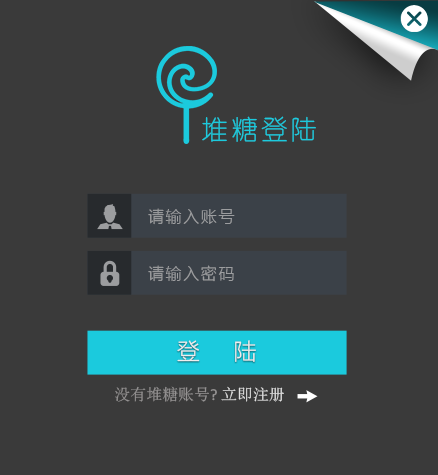
<style>
.page{position:relative;width:438px;height:475px;background:#3a3a3a}
.page>*{position:absolute;margin:0}
.t1{font:26.8px "YouYuan";letter-spacing:0.1em;color:#1ccadd}
.t2{font:16px "MicrosoftYaHeiLight";letter-spacing:0.1em;color:#9c9d9f}
.t3{font:22.8px "MicrosoftYaHeiLight";color:#eeeeee}
.t4{font:16px "SimSun";color:#959393}
.t5{font:16px "Calibri";color:#959393}
.t6{font:16px "SimSun";color:#dfdfdf}
</style>
<div class="page">
<p class="t1" style="left:202px;top:116px;width:114px;height:26px">堆糖登陆</p>
<p class="t2" style="left:148px;top:208px;width:87px;height:17px">请输入账号</p>
<p class="t2" style="left:148px;top:265px;width:86px;height:17px">请输入密码</p>
<p class="t3" style="left:177px;top:340px;width:79px;height:22px">登     陆</p>
<p class="t4" style="left:115px;top:386px;width:169px;height:16px">没有堆糖账号<span class="t5">? </span><span class="t6">立即注册</span></p>
</div>
